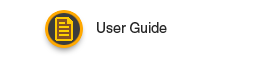
<style>
.page{position:relative;width:253px;height:57px;background:#ffffff}
.page>*{position:absolute;margin:0}
.t1{font:14px "Helvetica";color:#282828}
</style>
<div class="page">
<p class="t1" style="left:97px;top:22px;width:70px;height:11px">User Guide</p>
</div>
